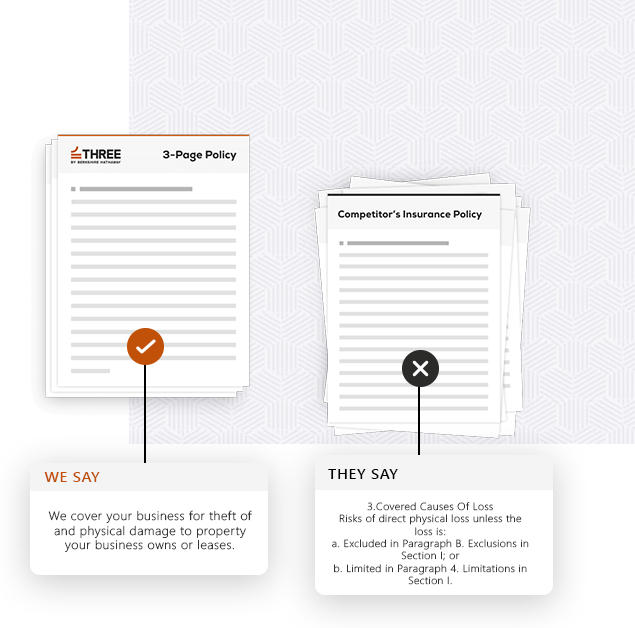
<style>
.page{position:relative;width:635px;height:628px;background:#ffffff}
.page>*{position:absolute;margin:0}
.t1{font:14.4px "SegoeUI-Semibold";letter-spacing:0.04em;color:#c15109;scale:1.04 1}
.t2{font:14.4px "SegoeUI-Semibold";letter-spacing:0.04em;color:#000000;scale:1.04 1}
.t3{font:12.2px "SegoeUI-Light";letter-spacing:0.04em;color:#343434;scale:1.04 1}
.t4{font:10.3px "SegoeUI-Light";letter-spacing:0.04em;color:#343434;scale:1.04 1}
</style>
<div class="page">
<p class="t1" style="left:44px;top:472px;width:56px;height:10px">WE SAY</p>
<p class="t2" style="left:328px;top:469px;width:70px;height:10px">THEY SAY</p>
<p class="t3" style="left:48px;top:510px;width:204px;height:43px;text-align:center">We cover your business for theft of and physical damage to property your business owns or leases.</p>
<p class="t4" style="left:332px;top:502px;width:197px;height:83px;text-align:center">3.Covered Causes Of Loss<br>Risks of direct physical loss unless the loss is:<br>a. Excluded in Paragraph B. Exclusions in Section I; or<br>b. Limited in Paragraph 4. Limitations in Section I.</p>
</div>
